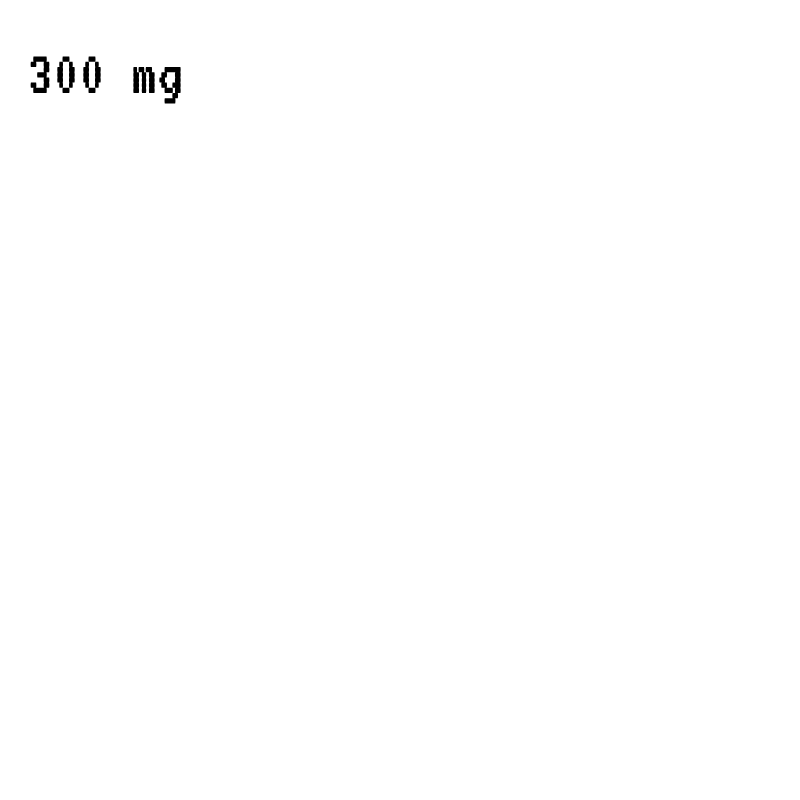
<style>
.page{position:relative;width:800px;height:800px;background:#ffffff}
.page>*{position:absolute;margin:0}
.t1{font:65px "VT323-Regular";color:#000000}
</style>
<div class="page">
<p class="t1" style="left:30px;top:56px;width:151px;height:48px">300 mg</p>
</div>
